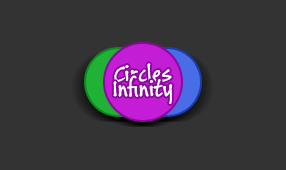
<style>
.page{position:relative;width:286px;height:170px;background:#333333}
.page>*{position:absolute;margin:0}
.t1{font:24.7px "BuxtonSketch";color:#ffffff}
</style>
<div class="page">
<p class="t1" style="left:114px;top:63px;width:58px;height:19px">Circles</p>
<p class="t1" style="left:113px;top:75px;width:60px;height:29px">Infinity</p>
</div>
